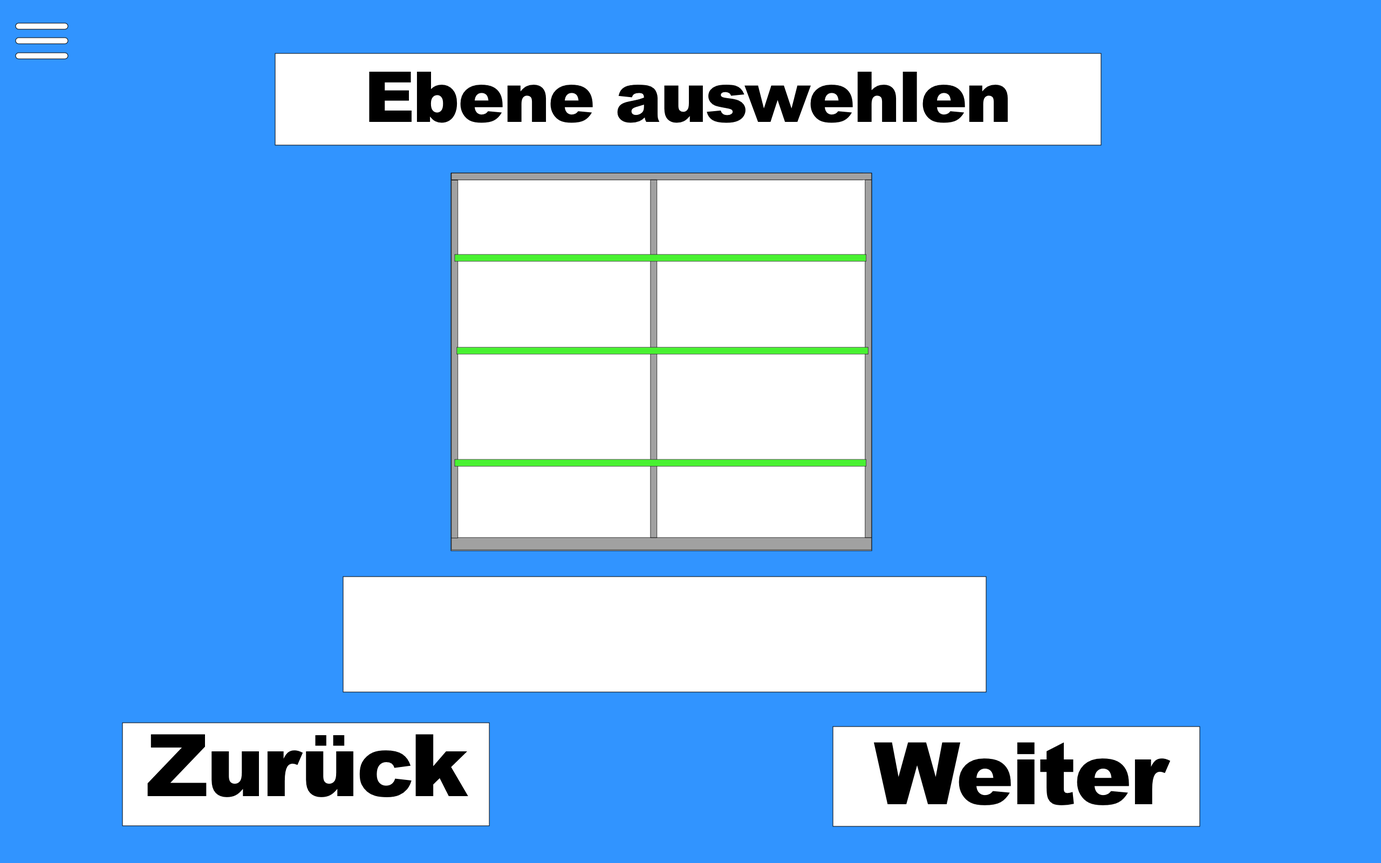
<style>
.page{position:relative;width:1381px;height:863px;background:#3194ff}
.page>*{position:absolute;margin:0}
.t1{font:70.1px "Arial-Black";letter-spacing:-0.024em;color:#000000}
.t2{font:86.3px "Arial-Black";letter-spacing:-0.024em;color:#000000}
</style>
<div class="page">
<p class="t1" style="left:369px;top:71px;width:639px;height:52px">Ebene auswehlen</p>
<p class="t2" style="left:147px;top:734px;width:321px;height:63px">Zurück</p>
<p class="t2" style="left:874px;top:742px;width:297px;height:64px">Weiter</p>
</div>
